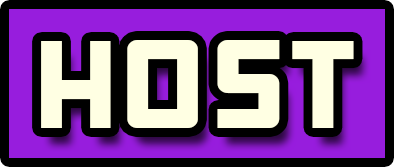
<style>
.page{position:relative;width:394px;height:167px;background:#000000}
.page>*{position:absolute;margin:0}
.t1{font:200px "ONRAMP";color:#ffffe3}
</style>
<div class="page">
<p class="t1" style="left:41px;top:40px;width:313px;height:88px">HOST</p>
</div>
